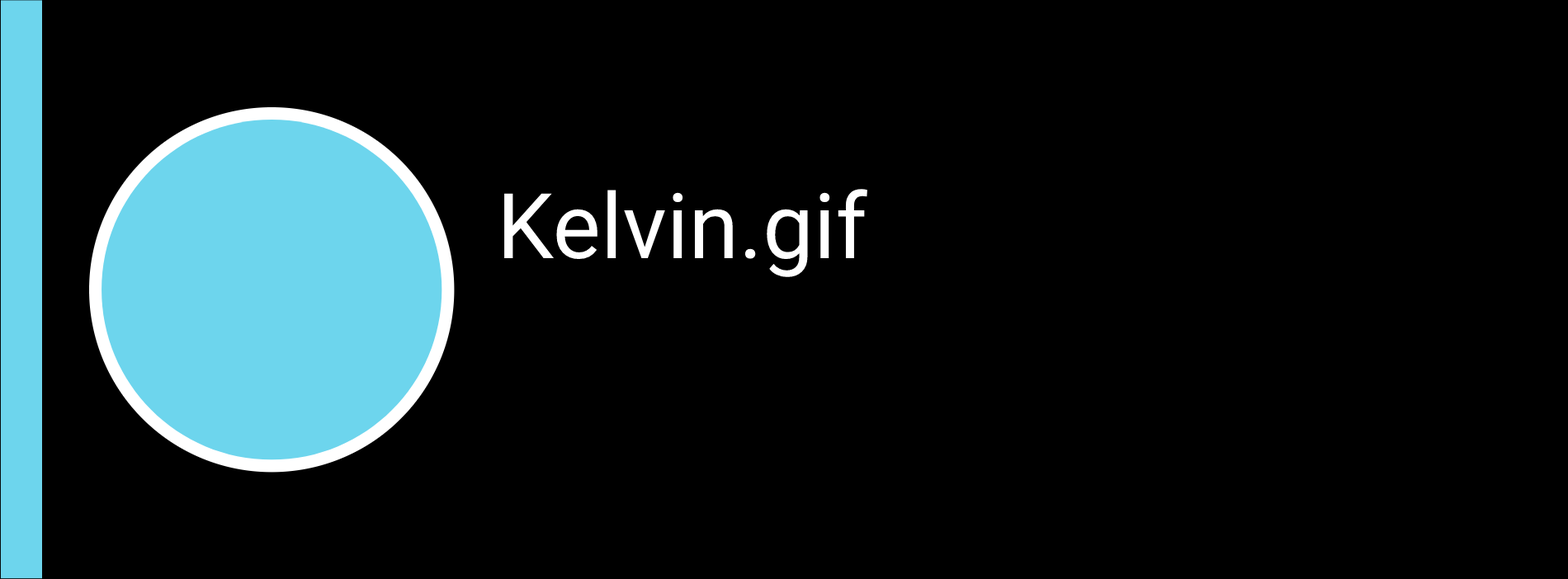
<style>
.page{position:relative;width:1568px;height:579px;background:#000000}
.page>*{position:absolute;margin:0}
.t1{font:90.8px "Roboto-Regular";color:#ffffff}
</style>
<div class="page">
<p class="t1" style="left:504px;top:189px;width:363px;height:88px">Kelvin.gif</p>
</div>
